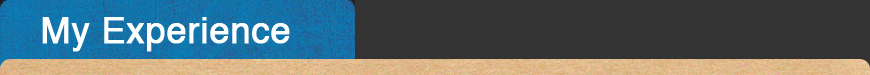
<style>
.page{position:relative;width:870px;height:75px;background:#333333}
.page>*{position:absolute;margin:0}
.t1{font:36px "Helvetica";color:#ffffff;font-weight:bold}
</style>
<div class="page">
<p class="t1" style="left:42px;top:17px;width:248px;height:35px">My Experience</p>
</div>
